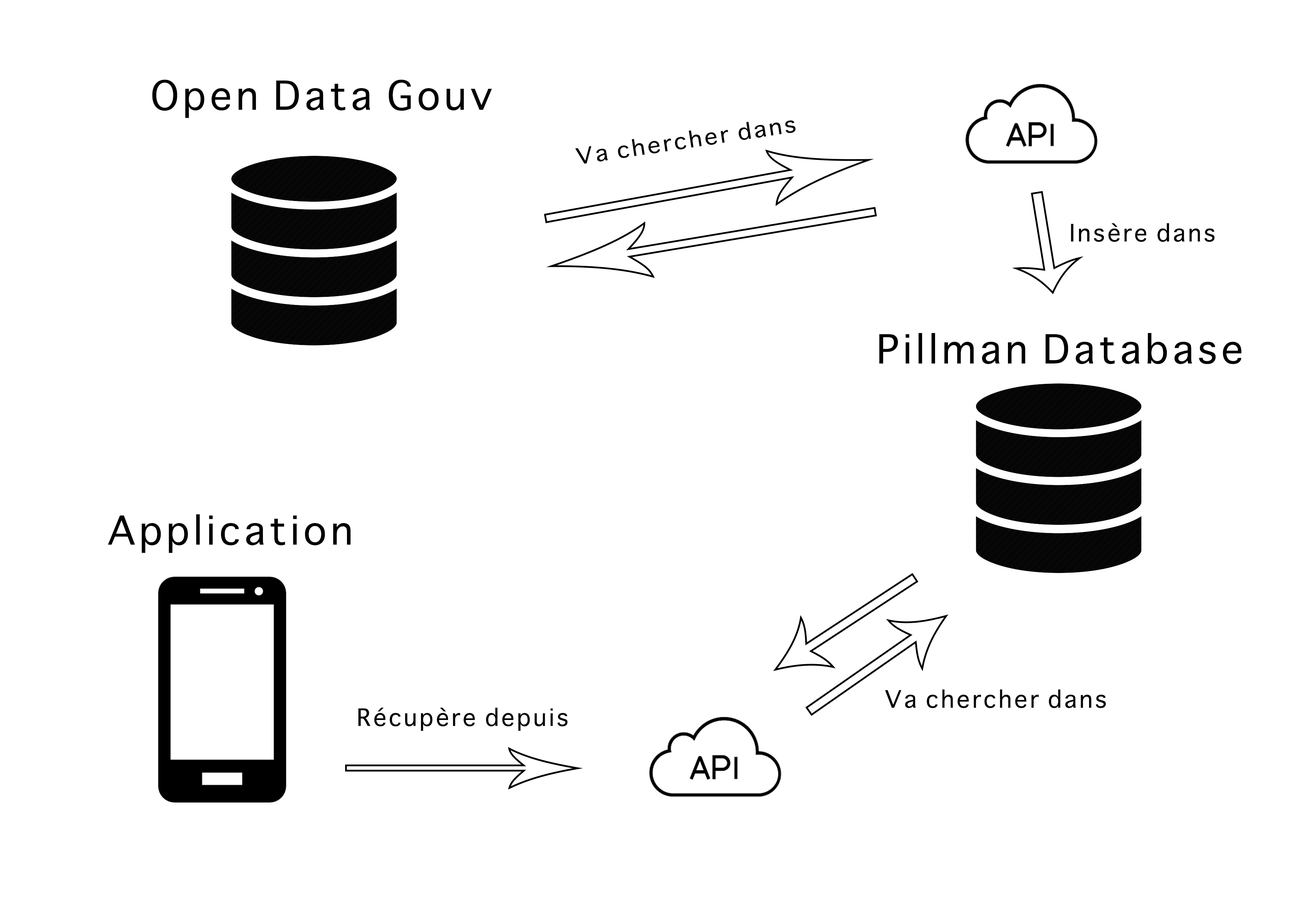
<style>
.page{position:relative;width:1299px;height:918px;background:#ffffff}
.page>*{position:absolute;margin:0}
.t1{font:38.6px "Sathu";letter-spacing:0.1em;color:#010101}
.t2{font:21.5px "Sathu";letter-spacing:0.1em;color:#000000;scale:1.07 1}
.t3{font:23.1px "Sathu";letter-spacing:0.1em;color:#000000}
.t4{font:38.6px "Sathu";letter-spacing:0.1em;color:#000000}
</style>
<div class="page">
<p class="t1" style="left:152px;top:80px;width:340px;height:38px">Open Data Gouv</p>
<p class="t2" style="left:575px;top:120px;width:221px;height:44px;rotate:-9deg">Va chercher dans</p>
<p class="t3" style="left:1071px;top:223px;width:143px;height:19px">Insère dans</p>
<p class="t4" style="left:879px;top:333px;width:362px;height:31px">Pillman Database</p>
<p class="t4" style="left:108px;top:514px;width:243px;height:39px">Application</p>
<p class="t3" style="left:885px;top:689px;width:221px;height:19px">Va chercher dans</p>
<p class="t3" style="left:358px;top:707px;width:210px;height:24px">Récupère depuis</p>
</div>
